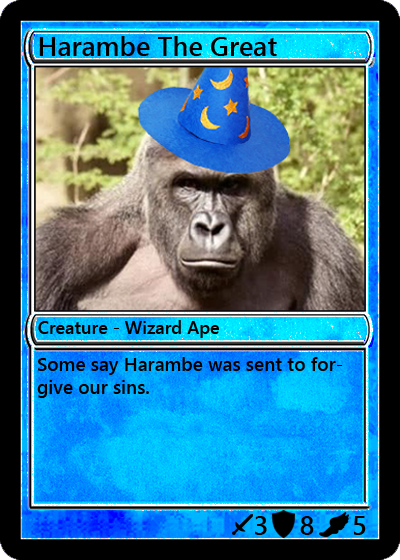
<style>
.page{position:relative;width:400px;height:560px}
.page>*{position:absolute;margin:0}
.t1{font:27px "YuGothicUI-Semibold";color:#000000}
.t2{font:18px "YuGothicUI-Semibold";color:#000000}
.t3{font:19px "YuGothicUI-Semibold";color:#000000}
</style>
<div class="page">
<p class="t1" style="left:39px;top:36px;width:238px;height:20px">Harambe The Great</p>
<p class="t2" style="left:38px;top:320px;width:182px;height:18px">Creature - Wizard Ape</p>
<p class="t3" style="left:37px;top:357px;width:306px;height:41px">Some say Harambe was sent to forgive our sins.</p>
<p class="t1" style="left:255px;top:516px;width:12px;height:19px">3</p>
<p class="t1" style="left:300px;top:516px;width:14px;height:19px">8</p>
<p class="t1" style="left:354px;top:516px;width:12px;height:19px">5</p>
</div>
